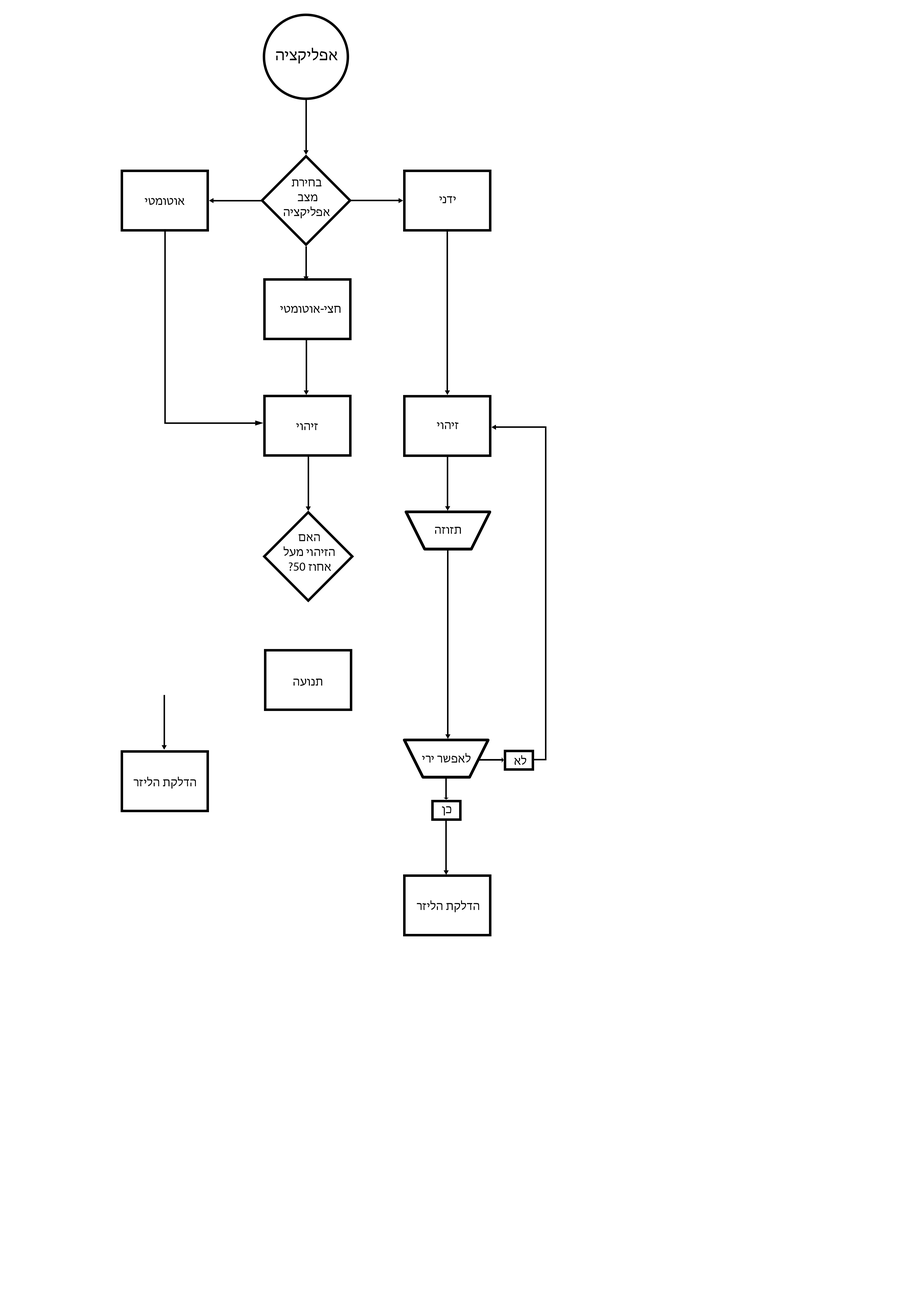
<style>
.page{position:relative;width:917px;height:1300px;background:#ffffff}
.page>*{position:absolute;margin:0}
.t1{font:16.5px "MyriadHebrew-Regular";color:#000000}
.t2{font:12.3px "MyriadHebrew-Regular";color:#000000}
</style>
<div class="page">
<p class="t1" style="left:276px;top:48px;width:62px;height:16px">אפליקציה</p>
<p class="t2" style="left:284px;top:179px;width:46px;height:39px;text-align:center">בחירת<br> מצב<br>אפליקציה</p>
<p class="t2" style="left:145px;top:198px;width:40px;height:7px">אוטומטי</p>
<p class="t2" style="left:439px;top:196px;width:17px;height:7px">ידני</p>
<p class="t2" style="left:280px;top:306px;width:61px;height:7px">חצי-אוטומטי</p>
<p class="t2" style="left:296px;top:423px;width:22px;height:7px">זיהוי</p>
<p class="t2" style="left:437px;top:422px;width:22px;height:7px">זיהוי</p>
<p class="t2" style="left:284px;top:534px;width:51px;height:37px;text-align:center">האם<br>הזיהוי מעל<br>?50 אחוז</p>
<p class="t2" style="left:435px;top:526px;width:26px;height:8px">תזוזה</p>
<p class="t2" style="left:293px;top:678px;width:29px;height:8px">תנועה</p>
<p class="t2" style="left:422px;top:753px;width:49px;height:9px">לאפשר ירי</p>
<p class="t2" style="left:514px;top:755px;width:12px;height:10px">לא</p>
<p class="t2" style="left:134px;top:776px;width:62px;height:13px">הדלקת הליזר</p>
<p class="t2" style="left:442px;top:806px;width:9px;height:9px">כן</p>
<p class="t2" style="left:417px;top:900px;width:62px;height:12px">הדלקת הליזר</p>
</div>
